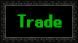
<style>
.page{position:relative;width:78px;height:43px;background:#000000}
.page>*{position:absolute;margin:0}
.t1{font:20px "RuneScape-UF";color:#00b901;font-weight:bold}
</style>
<div class="page">
<p class="t1" style="left:17px;top:14px;width:45px;height:14px">Trade</p>
</div>
